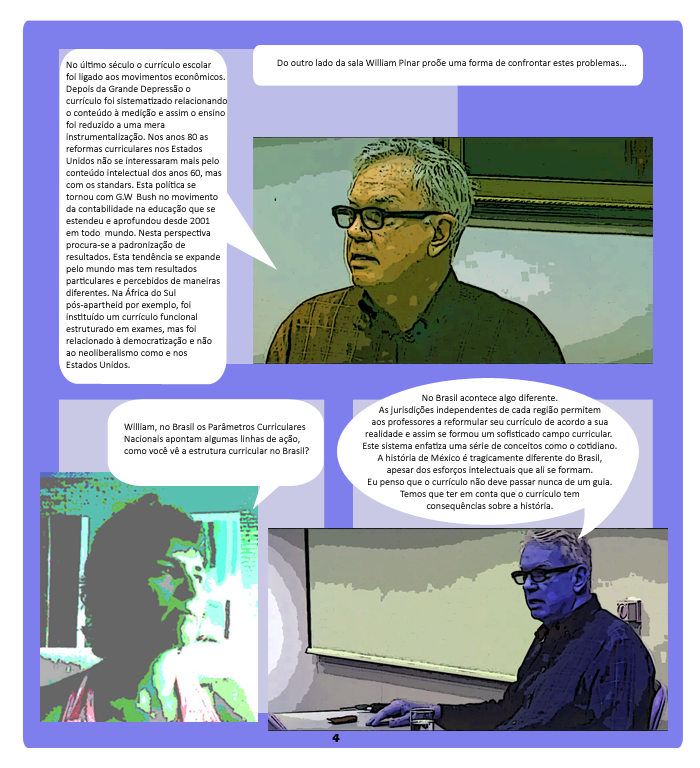
<style>
.page{position:relative;width:700px;height:768px;background:#ffffff}
.page>*{position:absolute;margin:0}
.t1{font:10px "Calibri";color:#010000}
.t2{font:10px "Calibri";color:#000000}
.t3{font:10px "Calibri";color:#ffffff}
.t4{font:10px "Calibri"}
.t5{font:12px "ErasITC-Bold";color:#000000}
</style>
<div class="page">
<p class="t1" style="left:66px;top:61px;width:161px;height:307px"><span class="t2">No último século o currículo escolar <br>foi ligado aos movimentos econômicos. <br>Depois da Grande Depressão o <br>currículo foi sistematizado relacionando <br>o conteúdo à medição e assim o ensino <br>foi reduzido a uma mera <br>instrumentalização. Nos anos 80 as <br>reformas curriculares nos Estados <br>Unidos não se interessaram mais pelo <br>conteúdo intelectual dos anos 60, mas <br>com os standars. Esta política se <br>tornou com G.W</span><span class="t3">.</span> Bush no movimento <br>da contabilidade na educação que se <br>estendeu e aprofundou desde 2001 <br>em todo  mundo. Nesta perspectiva <br>procura-se a padronização de <br>resultados. Esta tendência se expande <br>pelo mundo mas tem resultados <br>particulares e percebidos de maneiras <br>diferentes. Na África do Sul <br>pós-apartheid por exemplo, foi <br>instituído um currículo funcional <br>estruturado em exames, mas foi <br>relacionado à democratização e não <br>ao neoliberalismo como e nos <br>Estados Unidos.</p>
<p class="t2" style="left:277px;top:59px;width:349px;height:9px">Do outro lado da sala William Pinar proõe uma forma de confrontar estes problemas...</p>
<p class="t4" style="left:363px;top:394px;width:254px;height:117px;text-align:center">No Brasil acontece algo diferente. <br>As jurisdições independentes de cada região permitem <br>aos professores a reformular seu currículo de acordo a sua <br>realidade e assim se formou um sofisticado campo curricular.  <br>Este sistema enfatiza uma série de conceitos como o cotidiano. <br>A história de México é tragicamente diferente do Brasil, <br>apesar dos esforços intelectuais que ali se formam. <br>Eu penso que o currículo não deve passar nunca de um guia. <br>Temos que ter em conta que o currículo tem <br>consequências sobre a história.</p>
<p class="t2" style="left:124px;top:423px;width:185px;height:31px">William, no Brasil os Parâmetros Curriculares <br>Nacionais apontam algumas linhas de ação, <br>como você vê a estrutura curricular no Brasil?</p>
<p class="t5" style="left:332px;top:734px;width:8px;height:8px">4</p>
</div>
